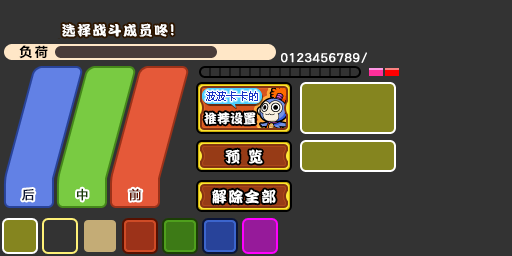
<style>
.page{position:relative;width:512px;height:256px;background:#333333}
.page>*{position:absolute;margin:0}
.t1{font:14px "DFPKanTingLiuW9";letter-spacing:0.1em;color:#ffffff}
.t2{font:16px "DFPKanTingLiuW9";letter-spacing:0.1em;color:#ffffff}
.t3{font:13px "MicrosoftYaHei-Bold";letter-spacing:0.2em;color:#000000}
.t4{font:11px "MicrosoftYaHei";color:#1936c7}
.t5{font:10px "MicrosoftYaHei";color:#1936c7}
.t6{font:13px "DFPKanTingLiuW9";color:#ffffff}
.t7{font:15px "DFPKanTingLiuW9";letter-spacing:0.1em;color:#ffffff}
.t8{font:12px "MicrosoftYaHei";letter-spacing:0.1em;color:#0a1436;font-weight:bold}
.t9{font:12px "MicrosoftYaHei";letter-spacing:0.1em;color:#1b3e05;font-weight:bold}
.t10{font:12px "MicrosoftYaHei";letter-spacing:0.1em;color:#601200;font-weight:bold}
</style>
<div class="page">
<p class="t1" style="left:62px;top:23px;width:112px;height:14px">选择战斗成员咚<span class="t2">!</span></p>
<p class="t3" style="left:19px;top:45px;width:29px;height:14px">负荷</p>
<p class="t4" style="left:206px;top:91px;width:52px;height:10px"><span class="t5">波波</span>卡卡的</p>
<p class="t6" style="left:204px;top:112px;width:52px;height:13px">推荐设置</p>
<p class="t7" style="left:225px;top:149px;width:38px;height:15px">预 览</p>
<p class="t8" style="left:22px;top:189px;width:13px;height:12px">后</p>
<p class="t9" style="left:77px;top:188px;width:11px;height:13px">中</p>
<p class="t10" style="left:129px;top:188px;width:13px;height:13px">前</p>
<p class="t7" style="left:212px;top:189px;width:64px;height:15px">解除全部</p>
</div>
